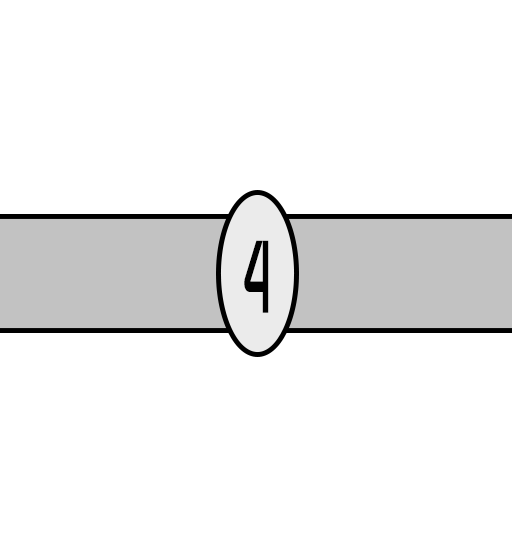
<style>
.page{position:relative;width:512px;height:550px;background:#ffffff}
.page>*{position:absolute;margin:0}
.t1{font:99.9px "PrisonerSF";color:#000000;scale:0.5 1}
</style>
<div class="page">
<p class="t1" style="left:244px;top:240px;width:25px;height:73px">4</p>
</div>
